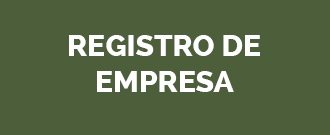
<style>
.page{position:relative;width:330px;height:135px;background:#4c5e3a}
.page>*{position:absolute;margin:0}
.t1{font:30px "Raleway-ExtraBold";color:#ffffff;text-transform:uppercase}
</style>
<div class="page">
<p class="t1" style="left:69px;top:35px;width:191px;height:57px;text-align:center">registro de<br>empresa</p>
</div>
